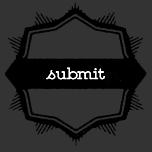
<style>
.page{position:relative;width:152px;height:152px;background:#333333}
.page>*{position:absolute;margin:0}
.t1{font:92.4px "EvelethShapes";color:#000000;scale:1.1 1}
.t2{font:14px "GistUprightLight";color:#ffffff;scale:1.1 1}
</style>
<div class="page">
<p class="t1" style="left:4px;top:2px;width:143px;height:144px">0</p>
<p class="t2" style="left:46px;top:67px;width:59px;height:13px">submit</p>
</div>
